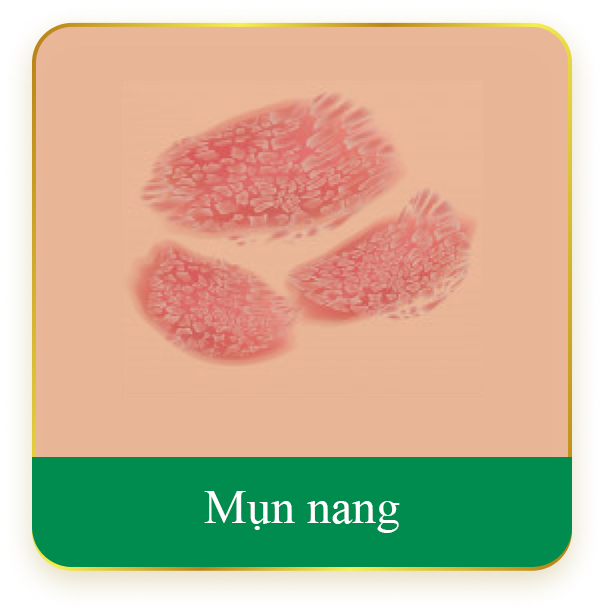
<style>
.page{position:relative;width:604px;height:613px;background:#e8b596}
.page>*{position:absolute;margin:0}
.t1{font:48px "TimesNewRomanPSMT";color:#ffffff}
</style>
<div class="page">
<p class="t1" style="left:204px;top:491px;width:196px;height:42px">Mụn nang</p>
</div>
